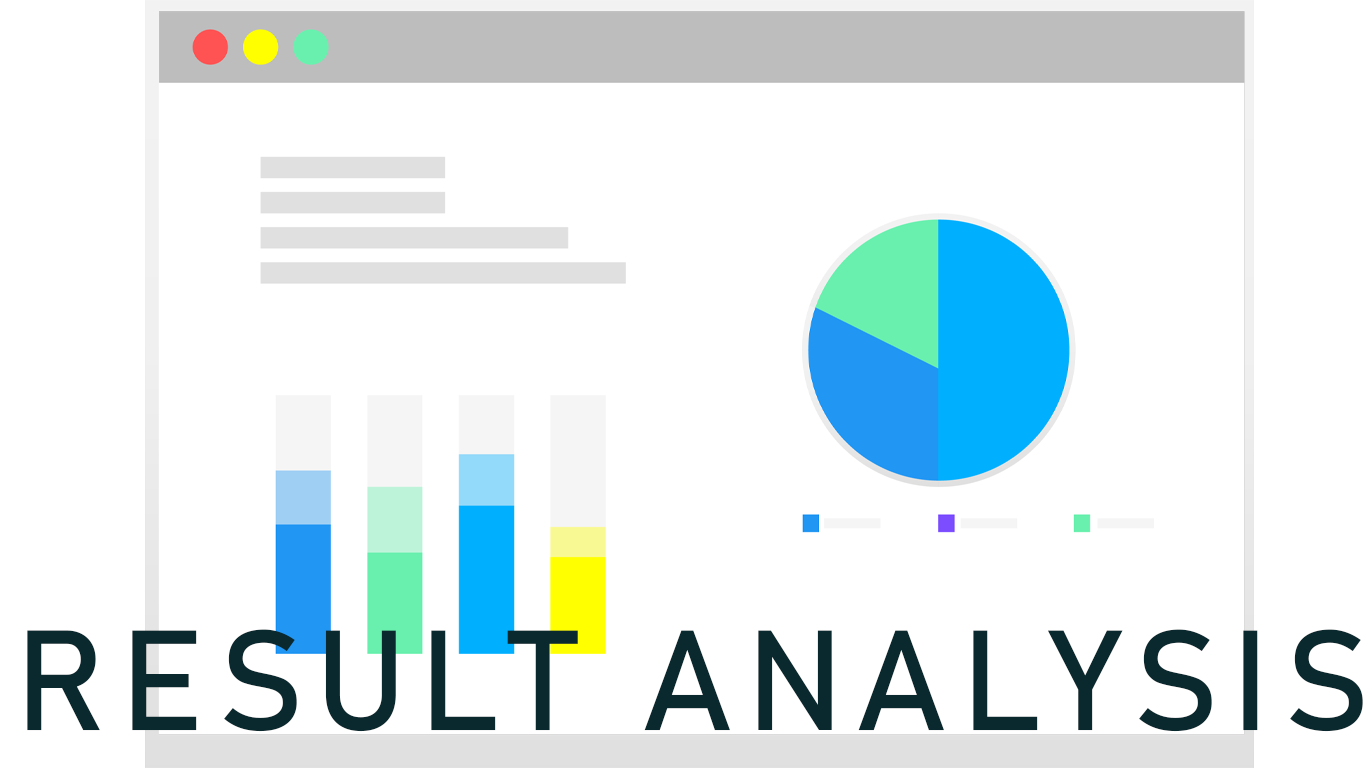
<style>
.page{position:relative;width:1366px;height:768px;background:#ffffff}
.page>*{position:absolute;margin:0}
.t1{font:139.6px "Bahnschrift";letter-spacing:0.1em;color:#09292f;font-weight:bold}
</style>
<div class="page">
<p class="t1" style="left:27px;top:629px;width:1336px;height:103px">RESULT ANALYSIS</p>
</div>
